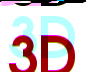
<style>
.page{position:relative;width:86px;height:72px;background:#ffffff}
.page>*{position:absolute;margin:0}
.t1{font:60px "Sabado";color:#b6ffff}
</style>
<div class="page">
<p class="t1" style="left:9px;top:16px;width:66px;height:42px">3D</p>
</div>
